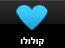
<style>
.page{position:relative;width:65px;height:48px;background:#000000}
.page>*{position:absolute;margin:0}
.t1{font:10px "Arial-BoldMT";color:#ffffff}
</style>
<div class="page">
<p class="t1" style="left:20px;top:37px;width:24px;height:9px">ולולוק</p>
</div>
